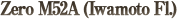
<style>
.page{position:relative;width:192px;height:19px;background:#ffffff}
.page>*{position:absolute;margin:0}
.t1{font:18px "RyuminPro-ExBold";letter-spacing:-0.08em;color:#4a3f32;font-weight:bold;scale:0.9 1}
</style>
<div class="page">
<p class="t1" style="left:0px;top:1px;width:177px;height:18px">Zero M52A (Iwamoto Fl.)</p>
</div>
